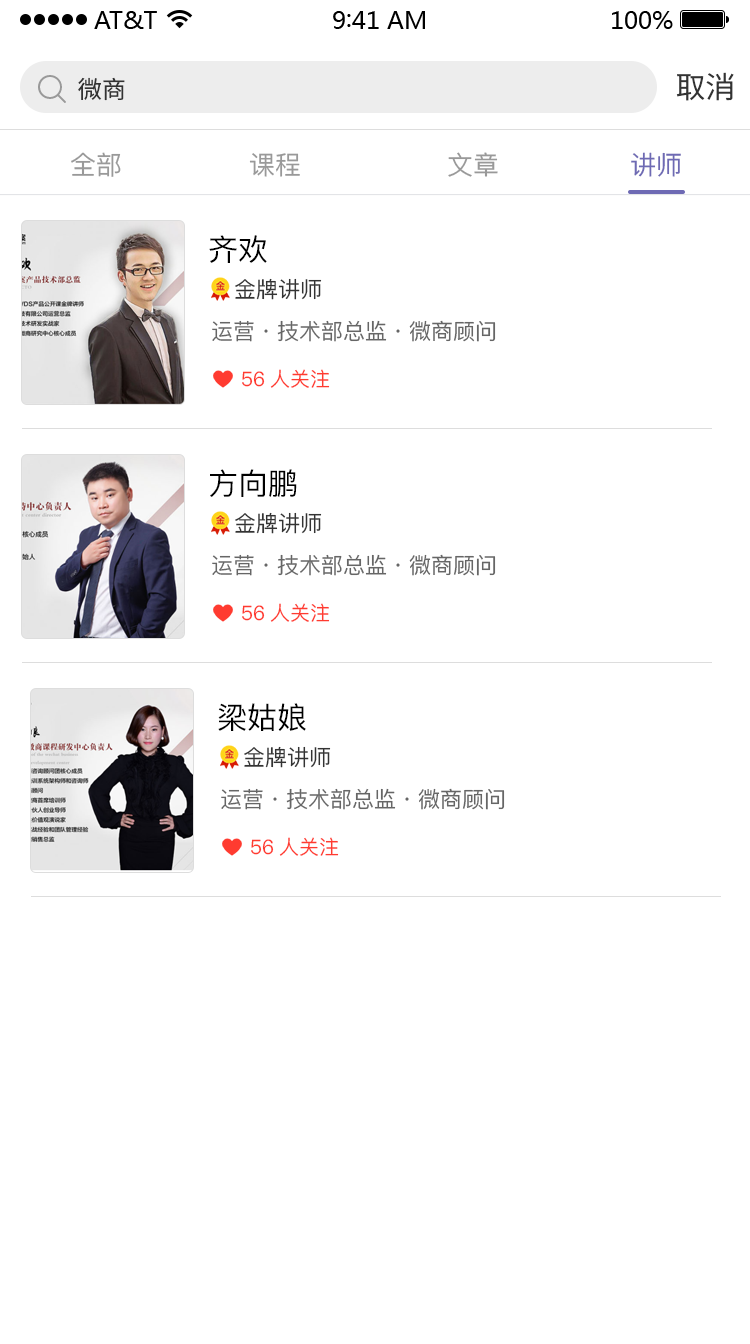
<style>
.page{position:relative;width:750px;height:1344px;background:#ffffff}
.page>*{position:absolute;margin:0}
.t1{font:24px "SourceHanSansCN-Regular";color:#333333}
.t2{font:30px "SourceHanSansCN-Regular";color:#333333}
.t3{font:26px "PingFang-SC-Medium";color:#999999}
.t4{font:26px "PingFang-SC-Medium";color:#6e6ab4}
.t5{font:30px "PingFang-SC-Medium";color:#000000}
.t6{font:22px "PingFang-SC-Medium";color:#333333}
.t7{font:22px "PingFang-SC-Medium";color:#666666}
.t8{font:20px "PingFang-SC-Medium";color:#ff3b30}
</style>
<div class="page">
<p class="t1" style="left:78px;top:77px;width:47px;height:24px">微商</p>
<p class="t2" style="left:676px;top:72px;width:58px;height:29px">取消</p>
<p class="t3" style="left:71px;top:152px;width:50px;height:25px">全部</p>
<p class="t3" style="left:249px;top:153px;width:51px;height:24px">课程</p>
<p class="t3" style="left:448px;top:152px;width:50px;height:25px">文章</p>
<p class="t4" style="left:631px;top:152px;width:50px;height:25px">讲师</p>
<p class="t5" style="left:209px;top:235px;width:58px;height:28px">齐欢</p>
<p class="t6" style="left:235px;top:278px;width:87px;height:22px">金牌讲师</p>
<p class="t7" style="left:212px;top:320px;width:284px;height:22px">运营·技术部总监·微商顾问</p>
<p class="t8" style="left:242px;top:369px;width:88px;height:19px">56人关注</p>
<p class="t5" style="left:210px;top:469px;width:87px;height:29px">方向鹏</p>
<p class="t6" style="left:235px;top:512px;width:87px;height:22px">金牌讲师</p>
<p class="t7" style="left:212px;top:554px;width:284px;height:22px">运营·技术部总监·微商顾问</p>
<p class="t8" style="left:242px;top:603px;width:88px;height:19px">56人关注</p>
<p class="t5" style="left:218px;top:703px;width:88px;height:28px">梁姑娘</p>
<p class="t6" style="left:244px;top:746px;width:87px;height:22px">金牌讲师</p>
<p class="t7" style="left:221px;top:788px;width:284px;height:22px">运营·技术部总监·微商顾问</p>
<p class="t8" style="left:251px;top:837px;width:88px;height:19px">56人关注</p>
</div>
